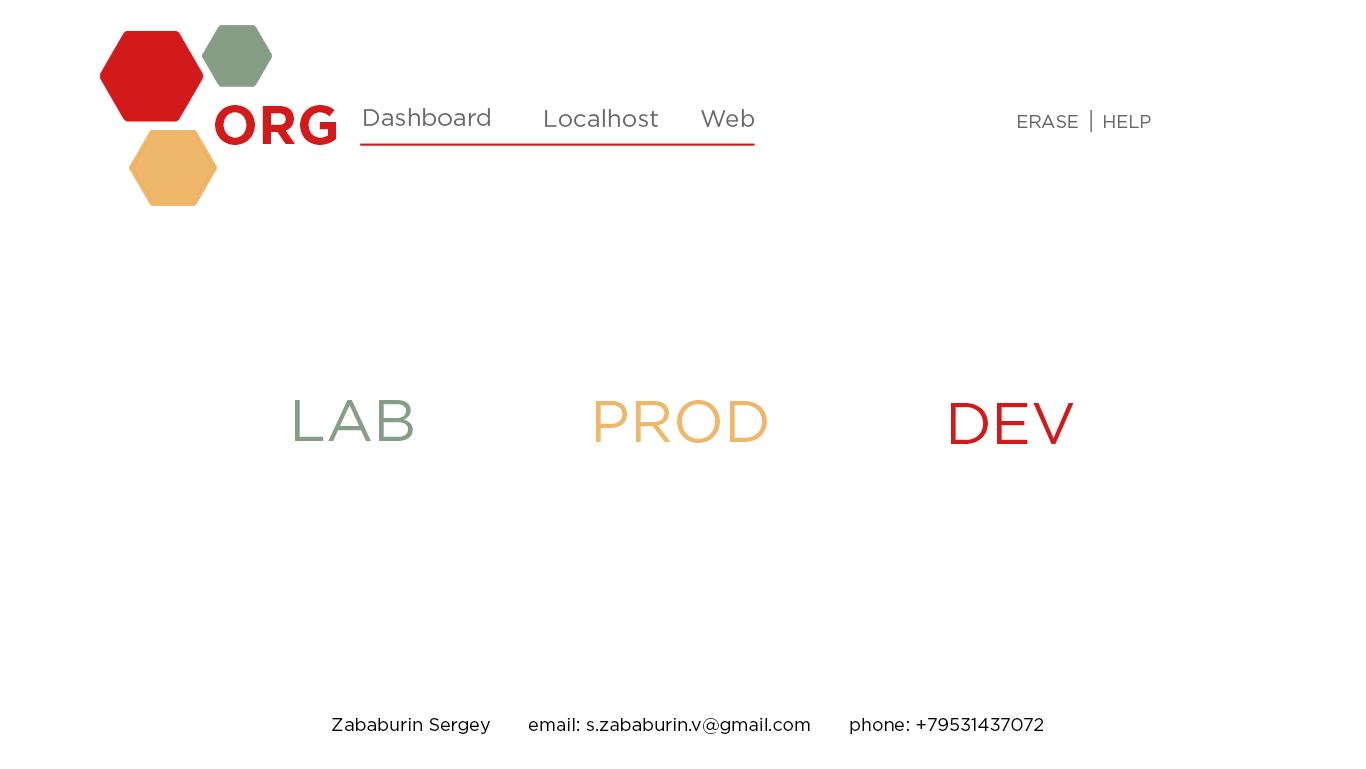
<style>
.page{position:relative;width:1366px;height:769px;background:#ffffff}
.page>*{position:absolute;margin:0}
.t1{font:53.9px "GothamPro-Bold";color:#d31a1a}
.t2{font:24px "GothamPro";color:#686868}
.t3{font:24px "GothamPro"}
.t4{font:18px "GothamPro";color:#686868}
.t5{font:58.2px "GothamPro";color:#869e86}
.t6{font:58.2px "GothamPro";color:#efb76a}
.t7{font:58.2px "GothamPro";color:#d31a1a}
.t8{font:18px "GothamPro";color:#000000}
</style>
<div class="page">
<p class="t1" style="left:215px;top:105px;width:121px;height:40px">ORG</p>
<p class="t2" style="left:364px;top:108px;width:126px;height:18px">Dashboard</p>
<p class="t2" style="left:545px;top:109px;width:113px;height:18px">Localhost</p>
<p class="t2" style="left:701px;top:109px;width:54px;height:18px">Web</p>
<p class="t3" style="left:1090px;top:110px;width:2px;height:22px">|</p>
<p class="t4" style="left:1018px;top:115px;width:60px;height:13px">ERASE</p>
<p class="t4" style="left:1104px;top:115px;width:47px;height:13px">HELP</p>
<p class="t5" style="left:295px;top:400px;width:118px;height:41px">LAB</p>
<p class="t6" style="left:596px;top:400px;width:171px;height:43px">PROD</p>
<p class="t7" style="left:951px;top:403px;width:123px;height:41px">DEV</p>
<p class="t8" style="left:332px;top:718px;width:712px;height:16px">Zababurin Sergey       email: s.zababurin.v@gmail.com       phone: +79531437072</p>
</div>
